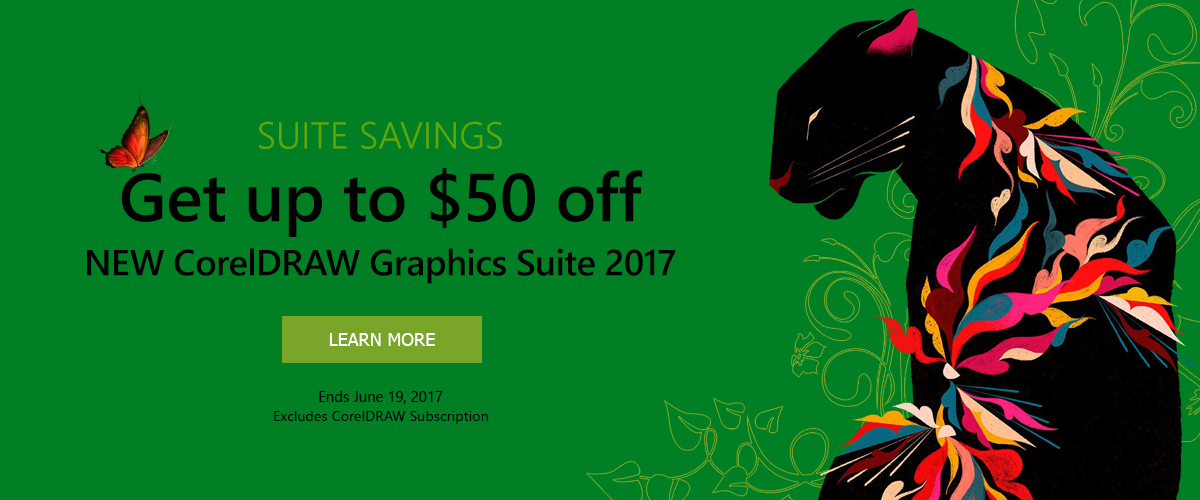
<style>
.page{position:relative;width:1200px;height:500px;background:#007f24}
.page>*{position:absolute;margin:0}
.t1{font:37.5px "SegoeUI-Semilight";color:#60a706;text-transform:uppercase}
.t2{font:36px/54px "SegoeUI-Semibold";letter-spacing:-0.015em;color:#000000}
.t3{font:68px/54px "SegoeUI-Semibold";letter-spacing:-0.005em;color:#000000}
.t4{font:18px "Tahoma";color:#ffffff;text-transform:uppercase}
.t5{font:14.9px "SegoeUI";color:#000000}
.t6{font:14.4px "SegoeUI";color:#000000}
</style>
<div class="page">
<p class="t1" style="left:259px;top:121px;width:243px;height:28px">Suite Savings</p>
<p class="t2" style="left:87px;top:168px;width:589px;height:116px;text-align:center"><span class="t3">Get up to $50 off<br></span>NEW CorelDRAW Graphics Suite 2017</p>
<p class="t4" style="left:329px;top:333px;width:106px;height:13px">Learn More</p>
<p class="t5" style="left:319px;top:391px;width:124px;height:13px">Ends June 19, 2017</p>
<p class="t6" style="left:274px;top:411px;width:214px;height:13px">Excludes CorelDRAW Subscription</p>
</div>
